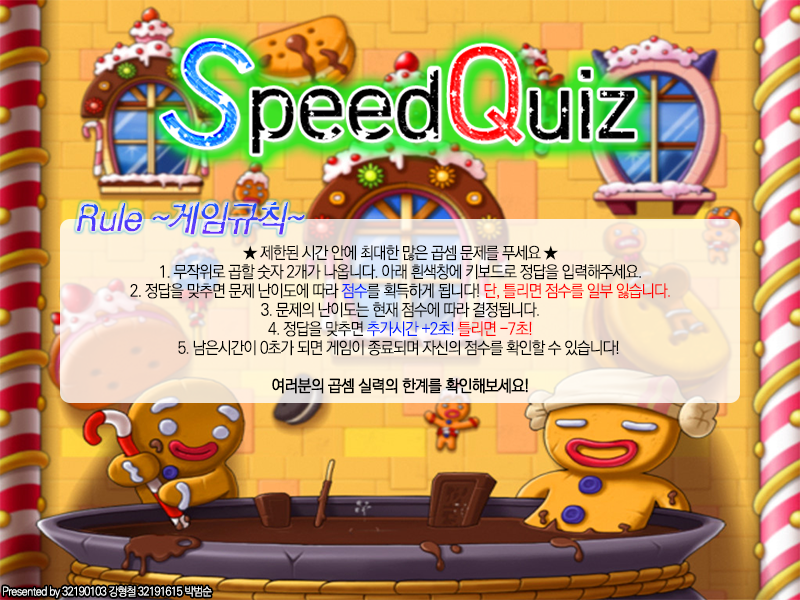
<style>
.page{position:relative;width:800px;height:600px}
.page>*{position:absolute;margin:0}
.t1{font:35px "KoPubWorldDotumLight";letter-spacing:-0.06em;font-weight:bold;font-style:italic}
.t2{font:16.6px/19px "KoPubWorldDotumLight";letter-spacing:-0.06em;color:#000000;scale:0.95 1}
.t3{font:16.6px/19px "KoPubWorldDotumLight";letter-spacing:-0.06em;color:#001eff;scale:0.95 1}
.t4{font:16.6px/19px "KoPubWorldDotumLight";letter-spacing:-0.06em;color:#ff0000;scale:0.95 1}
.t5{font:16.6px/19px "KoPubWorldDotumLight";letter-spacing:-0.06em;color:#001efe;scale:0.95 1}
.t6{font:16.6px/19px "KoPubWorldDotumLight";letter-spacing:-0.06em;color:#000000;font-weight:bold;scale:0.95 1}
.t7{font:11.6px "KoPubWorldDotumLight";letter-spacing:-0.06em;color:#ffffff;scale:0.95 1}
</style>
<div class="page">
<p class="t1" style="left:77px;top:202px;width:228px;height:33px">Rule ~게임규칙~</p>
<p class="t2" style="left:130px;top:245px;width:540px;height:149px;text-align:center">★ 제한된 시간 안에 최대한 많은 곱셈 문제를 푸세요 ★<br>1. 무작위로 곱할 숫자 2개가 나옵니다. 아래 흰색창에 키보드로 정답을 입력해주세요.<br>2. 정답을 맞추면 문제 난이도에 따라 <span class="t3">점수</span>를 획득하게 됩니다! <span class="t4">단, 틀리면 점수를 일부 잃습니다.<br></span>3. 문제의 난이도는 현재 점수에 따라 결정됩니다.<br>4. 정답을 맞추면 <span class="t5">추가시간 +2초! </span><span class="t4">틀리면 -7초!<br></span>5. 남은시간이 0초가 되면 게임이 종료되며 자신의 점수를 확인할 수 있습니다! <br><span class="t6"><br>여러분의 곱셈 실력의 한계를 확인해보세요!</span></p>
<p class="t7" style="left:3px;top:586px;width:209px;height:12px">Presented by 32190103 강형철 32191615 박범순</p>
</div>
